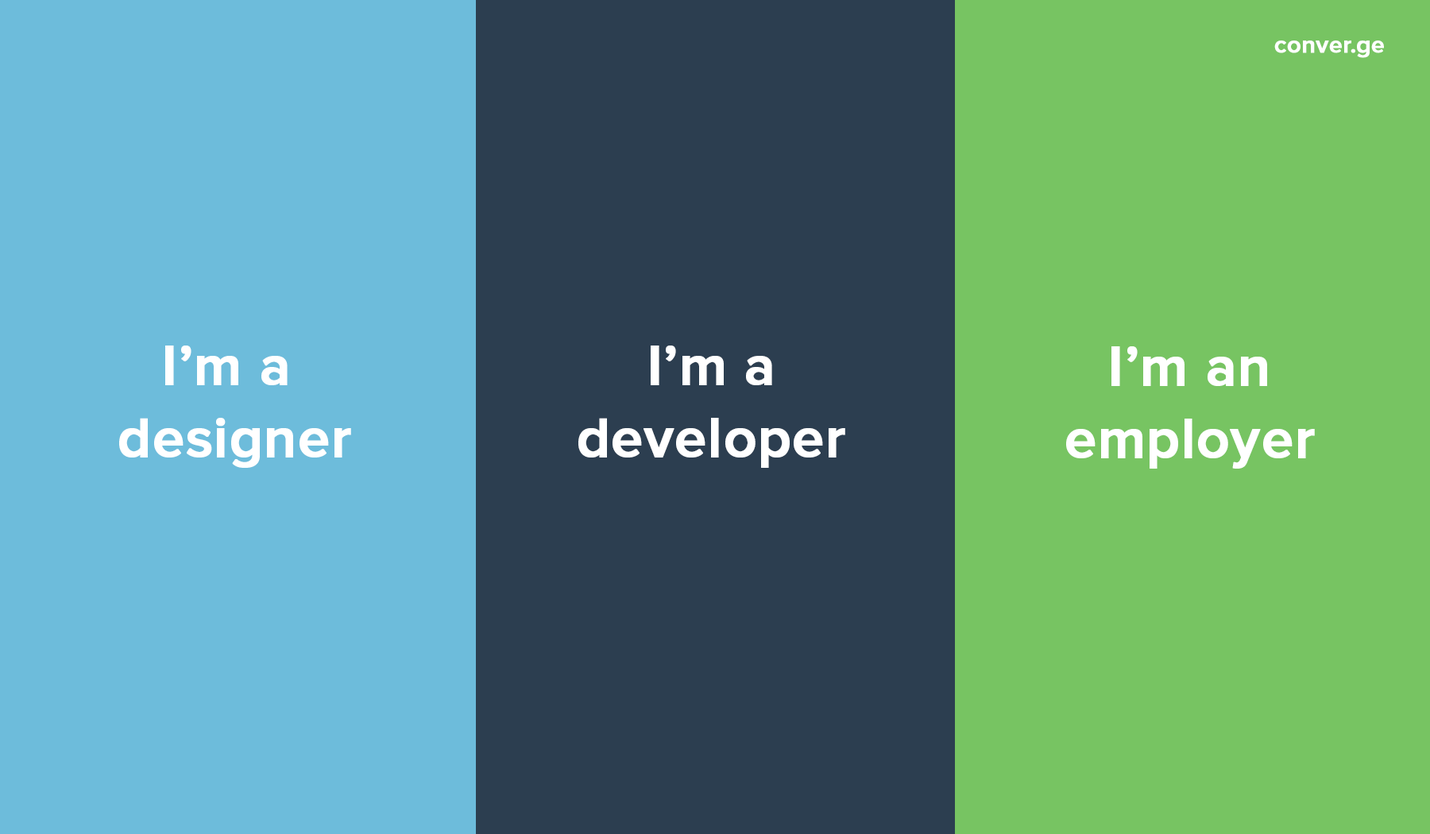
<style>
.page{position:relative;width:1430px;height:834px;background:#2c3e50}
.page>*{position:absolute;margin:0}
.t1{font:24.2px "ProximaNova-Semibold";color:#ffffff;font-weight:bold}
.t2{font:57.1px/72.1px "ProximaNova-Semibold";color:#ffffff;font-weight:bold}
</style>
<div class="page">
<p class="t1" style="left:1274px;top:41px;width:110px;height:17px">conver.ge</p>
<p class="t2" style="left:119px;top:346px;width:232px;height:122px;text-align:center">I’m a <br>designer</p>
<p class="t2" style="left:578px;top:346px;width:267px;height:122px;text-align:center">I’m a<br>developer</p>
<p class="t2" style="left:1066px;top:346px;width:249px;height:123px;text-align:center">I’m an<br>employer</p>
</div>
